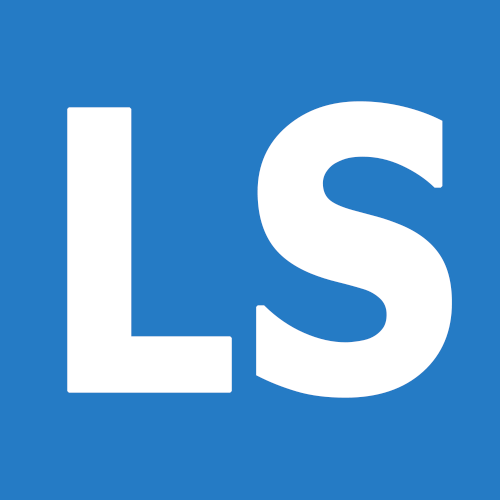
<style>
.page{position:relative;width:500px;height:500px;background:#257bc5}
.page>*{position:absolute;margin:0}
.t1{font:388.3px "Tahoma-Bold";letter-spacing:0.01em;color:#ffffff;font-weight:bold;scale:0.86 1}
</style>
<div class="page">
<p class="t1" style="left:67px;top:101px;width:385px;height:297px">LS</p>
</div>
